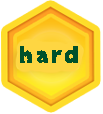
<style>
.page{position:relative;width:103px;height:114px;background:#ffffff}
.page>*{position:absolute;margin:0}
.t1{font:22px "Skranji-Bold";letter-spacing:0.15em;color:#01512b}
</style>
<div class="page">
<p class="t1" style="left:20px;top:46px;width:58px;height:17px">hard</p>
</div>
